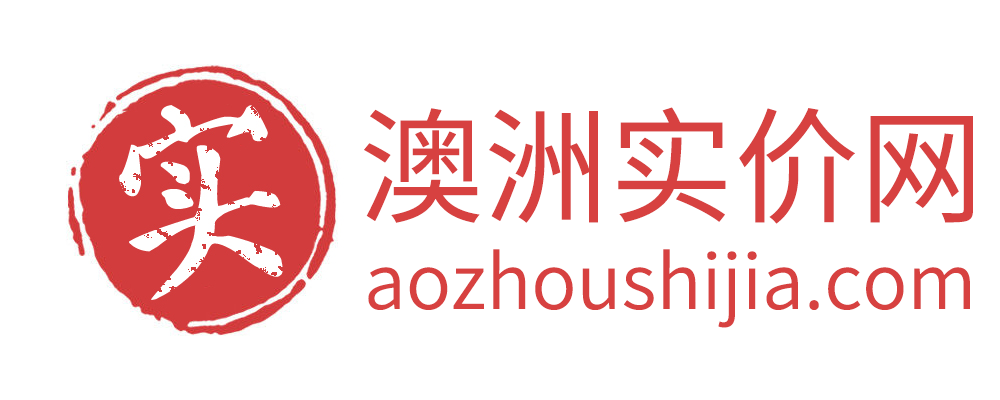
<style>
.page{position:relative;width:1000px;height:400px;background:#ffffff}
.page>*{position:absolute;margin:0}
.t1{font:125px "SourceHanSansCN-Regular";color:#d74140}
.t2{font:75px "SourceHanSansCN-Normal";color:#d74140}
</style>
<div class="page">
<p class="t1" style="left:364px;top:107px;width:609px;height:117px">澳洲实价网</p>
<p class="t2" style="left:368px;top:249px;width:602px;height:79px">aozhoushijia.com</p>
</div>
